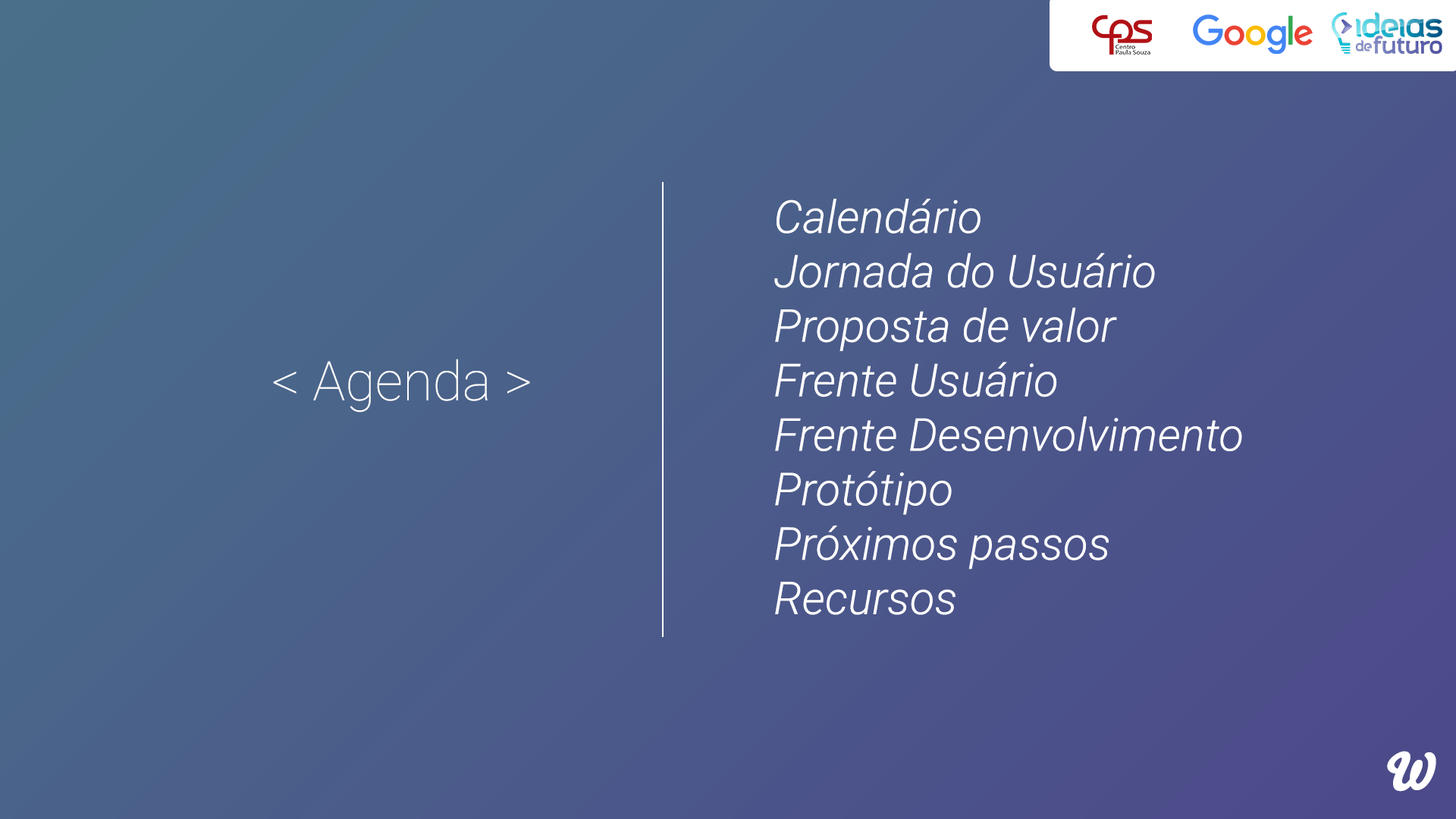
<style>
.page{position:relative;width:1456px;height:819px}
.page>*{position:absolute;margin:0}
.t1{font:45.4px "Roboto-LightItalic";color:#ffffff}
.t2{font:54.6px "Roboto-Thin";color:#ffffff}
.t3{font:50.8px "Bello-Pro";color:#ffffff}
</style>
<div class="page">
<p class="t1" style="left:774px;top:199px;width:468px;height:416px">Calendário<br>  Jornada do Usuário<br>  Proposta de valor<br>  Frente Usuário<br>  Frente Desenvolvimento<br>  Protótipo <br>  Próximos passos<br>  Recursos</p>
<p class="t2" style="left:273px;top:359px;width:257px;height:54px">&lt; Agenda &gt;</p>
<p class="t3" style="left:1387px;top:751px;width:49px;height:41px">W</p>
</div>
